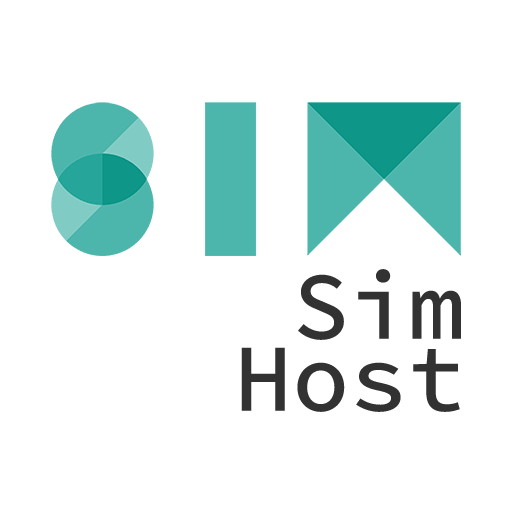
<style>
.page{position:relative;width:512px;height:512px;background:#ffffff}
.page>*{position:absolute;margin:0}
.t1{font:96px/72px "SourceCodePro-Medium";color:#323232}
</style>
<div class="page">
<p class="t1" style="left:241px;top:269px;width:220px;height:143px;text-align:right">Sim<br>Host</p>
</div>
